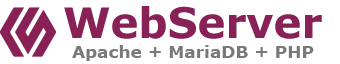
<style>
.page{position:relative;width:340px;height:64px;background:#ffffff}
.page>*{position:absolute;margin:0}
.t1{font:42px "Verdana-Bold";color:#882156}
.t2{font:17px "Verdana-Bold";color:#797979}
</style>
<div class="page">
<p class="t1" style="left:64px;top:6px;width:258px;height:33px">WebServer</p>
<p class="t2" style="left:72px;top:45px;width:242px;height:16px">Apache + MariaDB + PHP</p>
</div>
